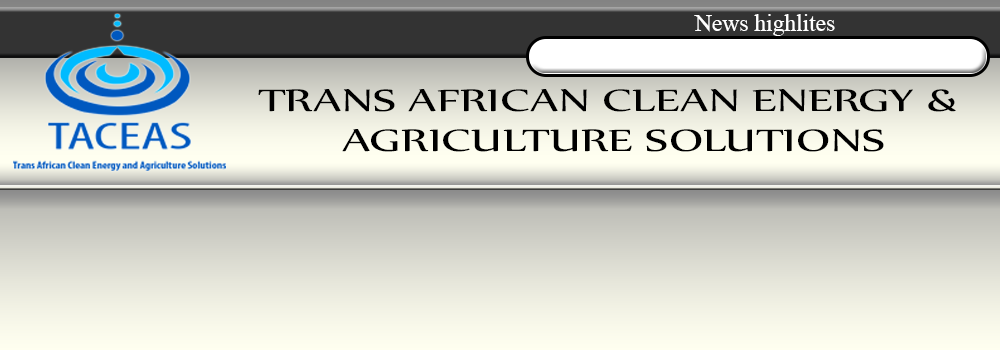
<style>
.page{position:relative;width:1000px;height:350px}
.page>*{position:absolute;margin:0}
.t1{font:23.5px "TimesNewRomanPSMT";color:#ffffff}
.t2{font:37.5px/40.5px "Nyala-Regular";color:#000000;scale:1.39 1}
</style>
<div class="page">
<p class="t1" style="left:694px;top:14px;width:141px;height:22px">News highlites</p>
<p class="t2" style="left:258px;top:89px;width:698px;height:63px;text-align:center">TRANS AFRICAN CLEAN ENERGY &amp; <br>AGRICULTURE SOLUTIONS</p>
</div>
